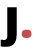
<style>
.page{position:relative;width:50px;height:50px;background:#ffffff}
.page>*{position:absolute;margin:0}
.t1{font:41.4px "OpenSans-Extrabold";color:#000000;font-weight:bold}
.t2{font:41.4px "OpenSans-Extrabold";color:#c24f4f;font-weight:bold}
</style>
<div class="page">
<p class="t1" style="left:0px;top:7px;width:32px;height:40px">J<span class="t2">.</span></p>
</div>
